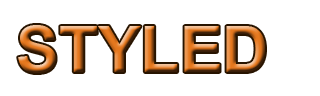
<style>
.page{position:relative;width:320px;height:96px;background:#ffffff}
.page>*{position:absolute;margin:0}
.t1{font:64px "Arial-BoldMT"}
</style>
<div class="page">
<p class="t1" style="left:18px;top:25px;width:247px;height:48px">STYLED</p>
</div>
